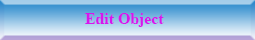
<style>
.page{position:relative;width:255px;height:40px}
.page>*{position:absolute;margin:0}
.t1{font:15.8px "TimesNewRomanPS-BoldMT";color:#d815ed}
</style>
<div class="page">
<p class="t1" style="left:85px;top:13px;width:79px;height:14px">Edit Object</p>
</div>
